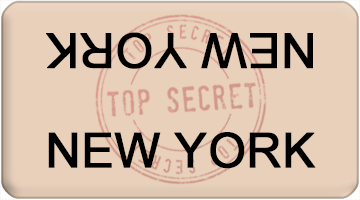
<style>
.page{position:relative;width:360px;height:200px;background:#e8d0bb}
.page>*{position:absolute;margin:0}
.t1{font:48px "ArialMT";color:#000000;font-weight:bold}
</style>
<div class="page">
<p class="t1" style="left:46px;top:32px;width:267px;height:37px;rotate:180deg">NEW YORK</p>
<p class="t1" style="left:48px;top:132px;width:268px;height:37px">NEW YORK</p>
</div>
